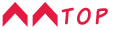
<style>
.page{position:relative;width:115px;height:30px;background:#ffffff}
.page>*{position:absolute;margin:0}
.t1{font:24px "KomikaText-Bold";letter-spacing:0.18em;color:#e41a41;text-transform:uppercase}
</style>
<div class="page">
<p class="t1" style="left:61px;top:7px;width:47px;height:18px">TOP</p>
</div>
